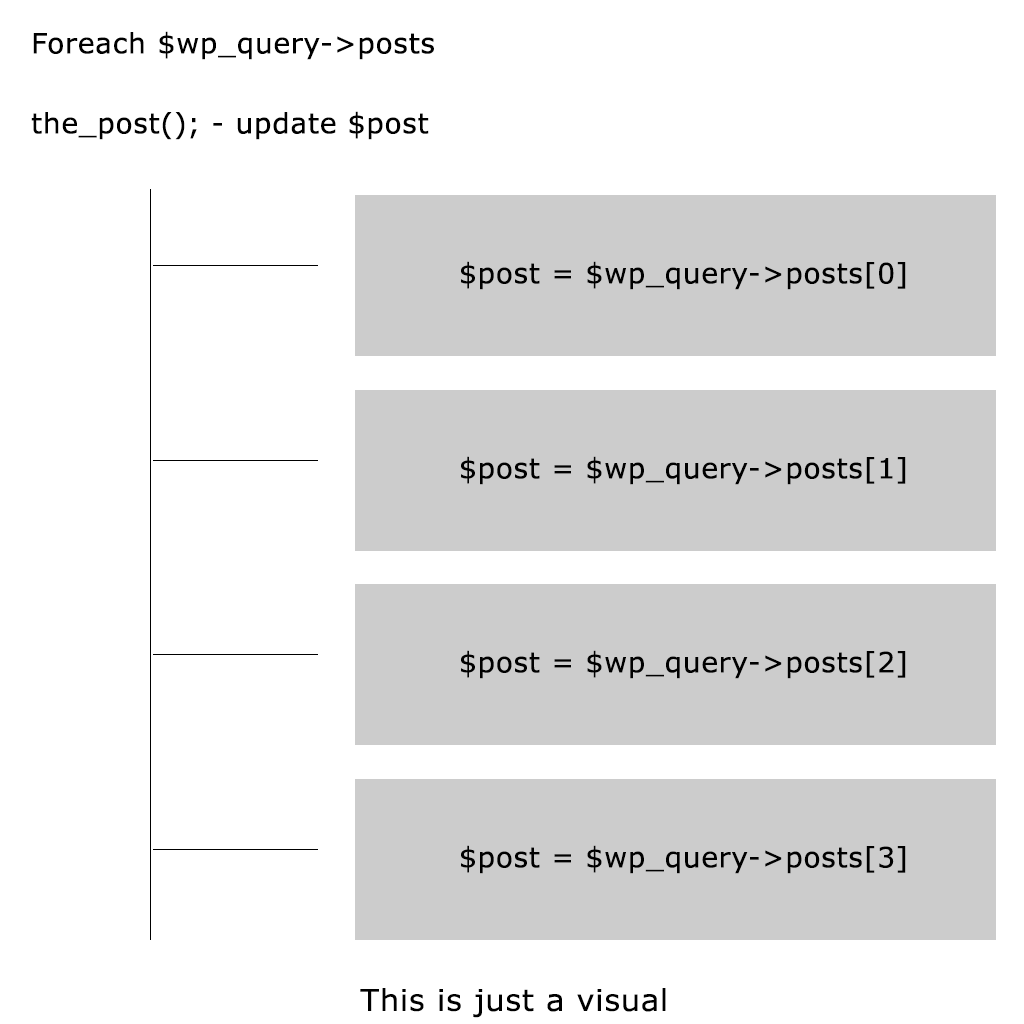
<style>
.page{position:relative;width:1024px;height:1024px;background:#ffffff}
.page>*{position:absolute;margin:0}
.t1{font:28px/40px "Verdana";color:#000000;font-weight:bold}
.t2{font:28px "Verdana";color:#000000;font-weight:bold}
.t3{font:30px "Verdana";color:#000000;font-weight:bold}
</style>
<div class="page">
<p class="t1" style="left:31px;top:31px;width:403px;height:109px">Foreach $wp_query-&gt;posts<br><br>the_post(); - update $post</p>
<p class="t2" style="left:461px;top:261px;width:445px;height:29px">$post = $wp_query-&gt;posts[0]</p>
<p class="t2" style="left:461px;top:456px;width:445px;height:29px">$post = $wp_query-&gt;posts[1]</p>
<p class="t2" style="left:461px;top:650px;width:445px;height:29px">$post = $wp_query-&gt;posts[2]</p>
<p class="t2" style="left:461px;top:845px;width:445px;height:29px">$post = $wp_query-&gt;posts[3]</p>
<p class="t3" style="left:360px;top:988px;width:306px;height:30px">This is just a visual</p>
</div>
